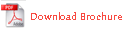
<style>
.page{position:relative;width:125px;height:30px;background:#ffffff}
.page>*{position:absolute;margin:0}
.t1{font:10px "Optima-Bold";color:#f84b42}
</style>
<div class="page">
<p class="t1" style="left:31px;top:12px;width:91px;height:8px">Download Brochure</p>
</div>
